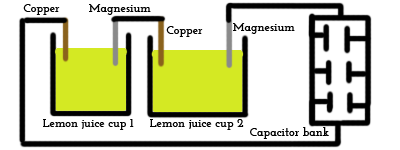
<style>
.page{position:relative;width:400px;height:150px;background:#ffffff}
.page>*{position:absolute;margin:0}
.t1{font:12px "JosefinSlab-Bold";color:#000000}
</style>
<div class="page">
<p class="t1" style="left:23px;top:4px;width:37px;height:11px">Copper</p>
<p class="t1" style="left:89px;top:4px;width:62px;height:11px">Magnesium</p>
<p class="t1" style="left:166px;top:26px;width:37px;height:11px">Copper</p>
<p class="t1" style="left:233px;top:23px;width:62px;height:11px">Magnesium</p>
<p class="t1" style="left:43px;top:119px;width:91px;height:11px">Lemon juice cup 1</p>
<p class="t1" style="left:150px;top:119px;width:94px;height:11px">Lemon juice cup 2</p>
<p class="t1" style="left:250px;top:127px;width:79px;height:12px">Capacitor bank</p>
</div>
